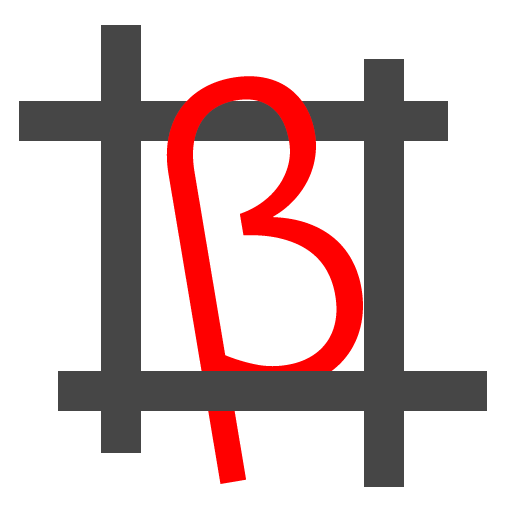
<style>
.page{position:relative;width:512px;height:512px;background:#ffffff}
.page>*{position:absolute;margin:0}
.t1{font:414.3px "SegoeUI-Semilight";color:#ff0000}
</style>
<div class="page">
<p class="t1" style="left:166px;top:76px;width:197px;height:408px;rotate:-10deg">β</p>
</div>
